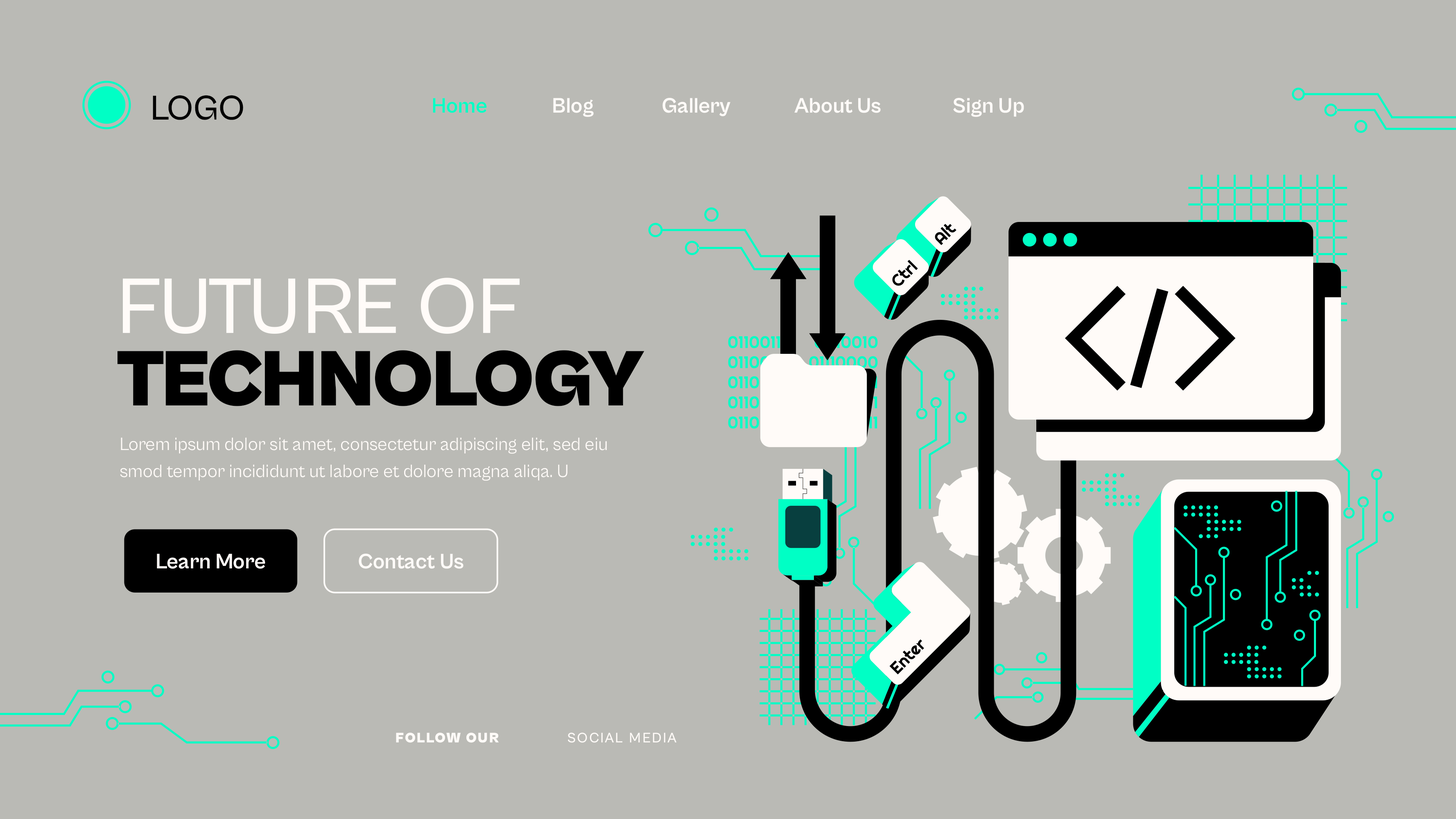
<style>
.page{position:relative;width:1456px;height:819px;background:#babab5}
.page>*{position:absolute;margin:0}
.t1{font:35.6px "CabinetGrotesk-Medium";color:#000000}
.t2{font:21.7px "CabinetGrotesk-Bold";color:#00ffc5}
.t3{font:21.7px "CabinetGrotesk-Bold";color:#fffbf8}
.t4{font:81.1px/72.4px "CabinetGrotesk-Black";color:#000000}
.t5{font:81.1px/72.4px "CabinetGrotesk-Medium";color:#fffbf8}
.t6{font:18.4px/27.3px "CabinetGrotesk-Regular";color:#fffbf8}
.t7{font:14.3px "CabinetGrotesk-Black";letter-spacing:0.1em;color:#fffbf8}
.t8{font:14.3px "CabinetGrotesk-Medium";letter-spacing:0.1em;color:#fffbf8}
</style>
<div class="page">
<p class="t1" style="left:153px;top:95px;width:90px;height:25px">LOGO</p>
<p class="t2" style="left:433px;top:98px;width:54px;height:15px">Home</p>
<p class="t3" style="left:553px;top:98px;width:41px;height:19px">Blog</p>
<p class="t3" style="left:663px;top:98px;width:67px;height:18px">Gallery</p>
<p class="t3" style="left:794px;top:98px;width:87px;height:15px">About Us</p>
<p class="t3" style="left:953px;top:98px;width:71px;height:19px">Sign Up</p>
<p class="t4" style="left:117px;top:278px;width:528px;height:128px"><span class="t5">FUTURE OF<br></span>TECHNOLOGY</p>
<p class="t6" style="left:120px;top:437px;width:487px;height:44px">Lorem ipsum dolor sit amet, consectetur adipiscing elit, sed eiu<br>smod tempor incididunt ut labore et dolore magna aliqa. U</p>
<p class="t3" style="left:157px;top:554px;width:108px;height:15px">Learn More</p>
<p class="t3" style="left:359px;top:554px;width:105px;height:15px">Contact Us</p>
<p class="t7" style="left:396px;top:733px;width:103px;height:10px">FOLLOW OUR</p>
<p class="t8" style="left:568px;top:733px;width:108px;height:10px">SOCIAL MEDIA</p>
</div>
